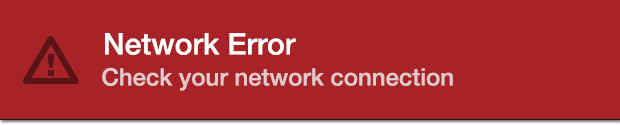
<style>
.page{position:relative;width:620px;height:125px;background:#a82327}
.page>*{position:absolute;margin:0}
.t1{font:30px "HelveticaNeue-Medium";color:#ffffff}
.t2{font:24px "HelveticaNeue-Medium";color:#e3c9ca}
</style>
<div class="page">
<p class="t1" style="left:105px;top:33px;width:191px;height:22px">Network Error</p>
<p class="t2" style="left:102px;top:67px;width:351px;height:24px">Check your network connection</p>
</div>
